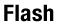
<style>
.page{position:relative;width:58px;height:26px;background:#ffffff}
.page>*{position:absolute;margin:0}
.t1{font:22.8px "HelveticaNeue-CondensedBold";letter-spacing:0.005em;color:#000000;scale:1.05 1}
</style>
<div class="page">
<p class="t1" style="left:4px;top:4px;width:50px;height:18px">Flash</p>
</div>
